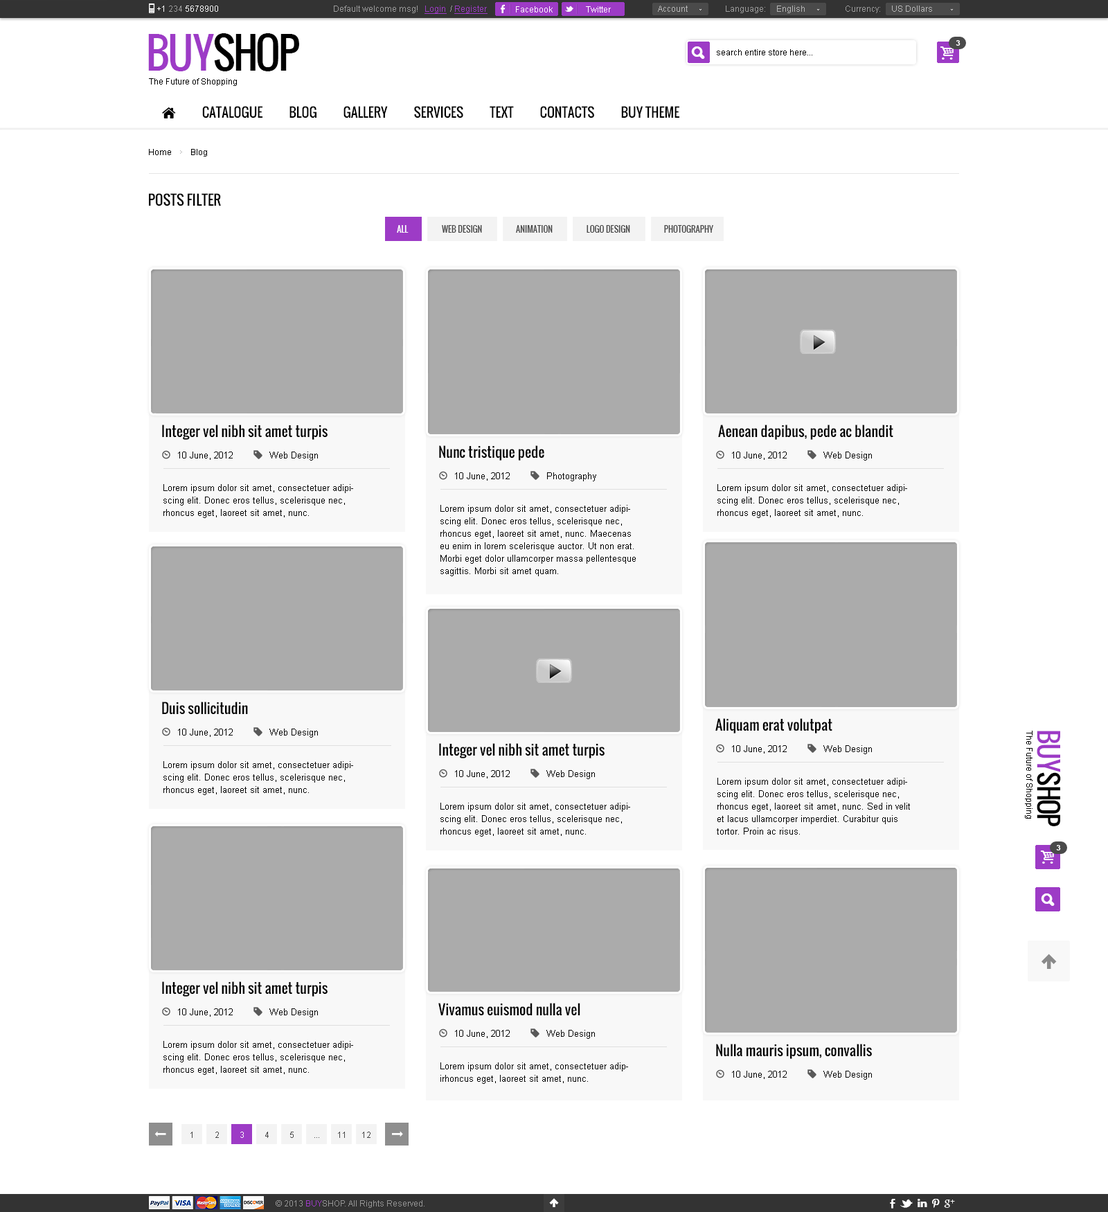
<style>
.page{position:relative;width:1108px;height:1212px;background:#ffffff}
.page>*{position:absolute;margin:0}
.t1{font:8.3px "ArialMT";color:#ffffff}
.t2{font:8.3px "ArialMT";color:#9b9b9b}
.t3{font:8.3px "ArialMT";color:#9d3bc6;text-decoration:underline}
.t4{font:8.3px "ArialMT";color:#b6b6b6}
.t5{font:41.5px "Oswald";letter-spacing:-0.06em;color:#000000;text-transform:uppercase}
.t6{font:41.5px "Oswald";letter-spacing:-0.06em;color:#9d3bc6;text-transform:uppercase}
.t7{font:7.6px "Arial-BoldMT";color:#ffffff;text-transform:uppercase}
.t8{font:8.3px "ArialMT";color:#000000}
.t9{font:13.8px "Oswald";color:#000000;text-transform:uppercase}
.t10{font:8.3px "Oswald";color:#484848;text-transform:uppercase}
.t11{font:8.3px "Oswald";color:#ffffff;text-transform:uppercase}
.t12{font:13.8px "Oswald";color:#000000}
.t13{font:9px "ArialMT";color:#000000}
.t14{font:9px/12.5px "ArialMT";color:#000000}
.t15{font:26.3px "Oswald";letter-spacing:-0.06em;color:#000000;text-transform:uppercase}
.t16{font:26.3px "Oswald";letter-spacing:-0.06em;color:#9d3bc6;text-transform:uppercase}
.t17{font:8.3px "ArialMT";color:#484848;text-transform:uppercase}
.t18{font:8.3px "ArialMT";color:#ffffff;text-transform:uppercase}
.t19{font:8.3px "ArialMT";color:#959595}
.t20{font:8.3px "ArialMT";color:#9d3bc6}
</style>
<div class="page">
<p class="t1" style="left:157px;top:6px;width:61px;height:6px">+1 <span class="t2">234 </span>5678900</p>
<p class="t2" style="left:334px;top:6px;width:153px;height:8px">Default welcome msg!   <span class="t3">Login </span> / <span class="t3">Register</span></p>
<p class="t2" style="left:334px;top:6px;width:153px;height:8px">Default welcome msg!   <span class="t3">Login </span> / <span class="t3">Register</span></p>
<p class="t4" style="left:658px;top:6px;width:29px;height:6px">Account</p>
<p class="t2" style="left:726px;top:6px;width:78px;height:7px">Language:     <span class="t4">English</span></p>
<p class="t4" style="left:845px;top:6px;width:87px;height:7px"><span class="t2">Currency:     </span>US Dollars</p>
<p class="t1" style="left:516px;top:6px;width:36px;height:6px">Facebook</p>
<p class="t1" style="left:586px;top:6px;width:25px;height:6px">Twitter</p>
<p class="t5" style="left:148px;top:33px;width:151px;height:38px"><span class="t6">buy</span>shop</p>
<p class="t7" style="left:955px;top:40px;width:5px;height:6px">3</p>
<p class="t8" style="left:717px;top:49px;width:95px;height:6px">search entire store here...</p>
<p class="t8" style="left:149px;top:78px;width:88px;height:8px">The Future of Shopping</p>
<p class="t8" style="left:149px;top:149px;width:58px;height:7px">Home         Blog</p>
<p class="t9" style="left:149px;top:193px;width:72px;height:13px">POSTS FILTER</p>
<p class="t10" style="left:397px;top:225px;width:316px;height:8px"><span class="t11">All                    </span>Web Design                    Animation                    Logo Design                    Photography</p>
<p class="t12" style="left:162px;top:424px;width:165px;height:16px">Integer vel nibh sit amet turpis</p>
<p class="t12" style="left:718px;top:424px;width:175px;height:16px">Aenean dapibus, pede ac blandit</p>
<p class="t12" style="left:439px;top:445px;width:105px;height:15px">Nunc tristique pede</p>
<p class="t13" style="left:178px;top:451px;width:140px;height:9px">10 June, 2012             Web Design</p>
<p class="t13" style="left:732px;top:451px;width:140px;height:9px">10 June, 2012             Web Design</p>
<p class="t13" style="left:455px;top:472px;width:141px;height:9px">10 June, 2012             Photography</p>
<p class="t14" style="left:163px;top:484px;width:190px;height:34px">Lorem ipsum dolor sit amet, consectetuer adipiscing elit. Donec eros tellus, scelerisque nec, rhoncus eget, laoreet sit amet, nunc.</p>
<p class="t14" style="left:717px;top:484px;width:190px;height:34px">Lorem ipsum dolor sit amet, consectetuer adipiscing elit. Donec eros tellus, scelerisque nec, rhoncus eget, laoreet sit amet, nunc.</p>
<p class="t14" style="left:440px;top:505px;width:196px;height:71px">Lorem ipsum dolor sit amet, consectetuer adipiscing elit. Donec eros tellus, scelerisque nec, rhoncus eget, laoreet sit amet, nunc. Maecenas eu enim in lorem scelerisque auctor. Ut non erat. Morbi eget dolor ullamcorper massa pellentesque sagittis. Morbi sit amet quam.</p>
<p class="t12" style="left:162px;top:701px;width:86px;height:13px">Duis sollicitudin</p>
<p class="t12" style="left:715px;top:718px;width:117px;height:15px">Aliquam erat volutpat</p>
<p class="t13" style="left:178px;top:728px;width:140px;height:9px">10 June, 2012             Web Design</p>
<p class="t8" style="left:1025px;top:730px;width:7px;height:88px;rotate:90deg">The Future of Shopping</p>
<p class="t15" style="left:1036px;top:730px;width:25px;height:96px;rotate:90deg"><span class="t16">buy</span>shop</p>
<p class="t12" style="left:439px;top:743px;width:165px;height:15px">Integer vel nibh sit amet turpis</p>
<p class="t13" style="left:732px;top:745px;width:140px;height:9px">10 June, 2012             Web Design</p>
<p class="t14" style="left:163px;top:761px;width:190px;height:34px">Lorem ipsum dolor sit amet, consectetuer adipiscing elit. Donec eros tellus, scelerisque nec, rhoncus eget, laoreet sit amet, nunc.</p>
<p class="t13" style="left:455px;top:770px;width:140px;height:9px">10 June, 2012             Web Design</p>
<p class="t14" style="left:717px;top:777px;width:193px;height:57px">Lorem ipsum dolor sit amet, consectetuer adipiscing elit. Donec eros tellus, scelerisque nec, rhoncus eget, laoreet sit amet, nunc. Sed in velit et lacus ullamcorper imperdiet. Curabitur quis tortor. Proin ac risus.</p>
<p class="t14" style="left:440px;top:802px;width:190px;height:34px">Lorem ipsum dolor sit amet, consectetuer adipiscing elit. Donec eros tellus, scelerisque nec, rhoncus eget, laoreet sit amet, nunc.</p>
<p class="t7" style="left:1056px;top:845px;width:5px;height:5px">3</p>
<p class="t12" style="left:162px;top:981px;width:165px;height:15px">Integer vel nibh sit amet turpis</p>
<p class="t13" style="left:178px;top:1008px;width:140px;height:9px">10 June, 2012             Web Design</p>
<p class="t12" style="left:438px;top:1002px;width:142px;height:14px">Vivamus euismod nulla vel</p>
<p class="t13" style="left:455px;top:1029px;width:140px;height:9px">10 June, 2012             Web Design</p>
<p class="t14" style="left:163px;top:1041px;width:190px;height:33px">Lorem ipsum dolor sit amet, consectetuer adipiscing elit. Donec eros tellus, scelerisque nec, rhoncus eget, laoreet sit amet, nunc.</p>
<p class="t12" style="left:716px;top:1043px;width:156px;height:16px">Nulla mauris ipsum, convallis</p>
<p class="t14" style="left:440px;top:1062px;width:188px;height:21px">Lorem ipsum dolor sit amet, consectetuer adipirhoncus eget, laoreet sit amet, nunc.</p>
<p class="t13" style="left:732px;top:1070px;width:140px;height:9px">10 June, 2012             Web Design</p>
<p class="t17" style="left:190px;top:1131px;width:2px;height:6px">1</p>
<p class="t17" style="left:215px;top:1131px;width:4px;height:6px">2</p>
<p class="t18" style="left:240px;top:1131px;width:4px;height:6px">3</p>
<p class="t17" style="left:265px;top:1131px;width:4px;height:6px">4</p>
<p class="t17" style="left:290px;top:1131px;width:4px;height:6px">5</p>
<p class="t17" style="left:338px;top:1131px;width:7px;height:6px">11</p>
<p class="t17" style="left:362px;top:1131px;width:8px;height:6px">12</p>
<p class="t17" style="left:314px;top:1137px;width:5px;height:0px">...</p>
<p class="t19" style="left:276px;top:1200px;width:148px;height:7px">© 2013 <span class="t20">BUY</span>SHOP. All Rights Reserved.</p>
</div>
